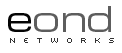
<style>
.page{position:relative;width:122px;height:53px;background:#ffffff}
.page>*{position:absolute;margin:0}
.t1{font:35px "Eurostile-ExtendedTwo";letter-spacing:-0.025em;color:#5d5d5d}
.t2{font:35px "Eurostile-ExtendedTwo";letter-spacing:-0.025em;color:#040404}
.t3{font:8px "Sevenet7";letter-spacing:1em;color:#333333}
</style>
<div class="page">
<p class="t1" style="left:8px;top:6px;width:103px;height:26px"><span class="t2">e</span>ond</p>
<p class="t3" style="left:10px;top:38px;width:104px;height:5px">networks</p>
</div>
